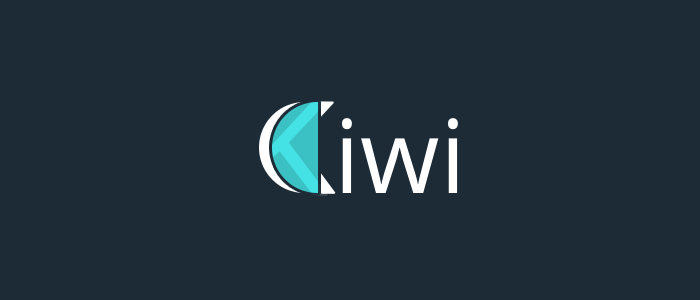
<style>
.page{position:relative;width:700px;height:300px;background:#1c2b36}
.page>*{position:absolute;margin:0}
.t1{font:102.4px "OpenSans";color:#ffffff}
.t2{font:102.4px "OpenSans";letter-spacing:-0.1em;color:#000000}
</style>
<div class="page">
<p class="t1" style="left:342px;top:118px;width:116px;height:75px"><span class="t2">    </span>iwi</p>
</div>
